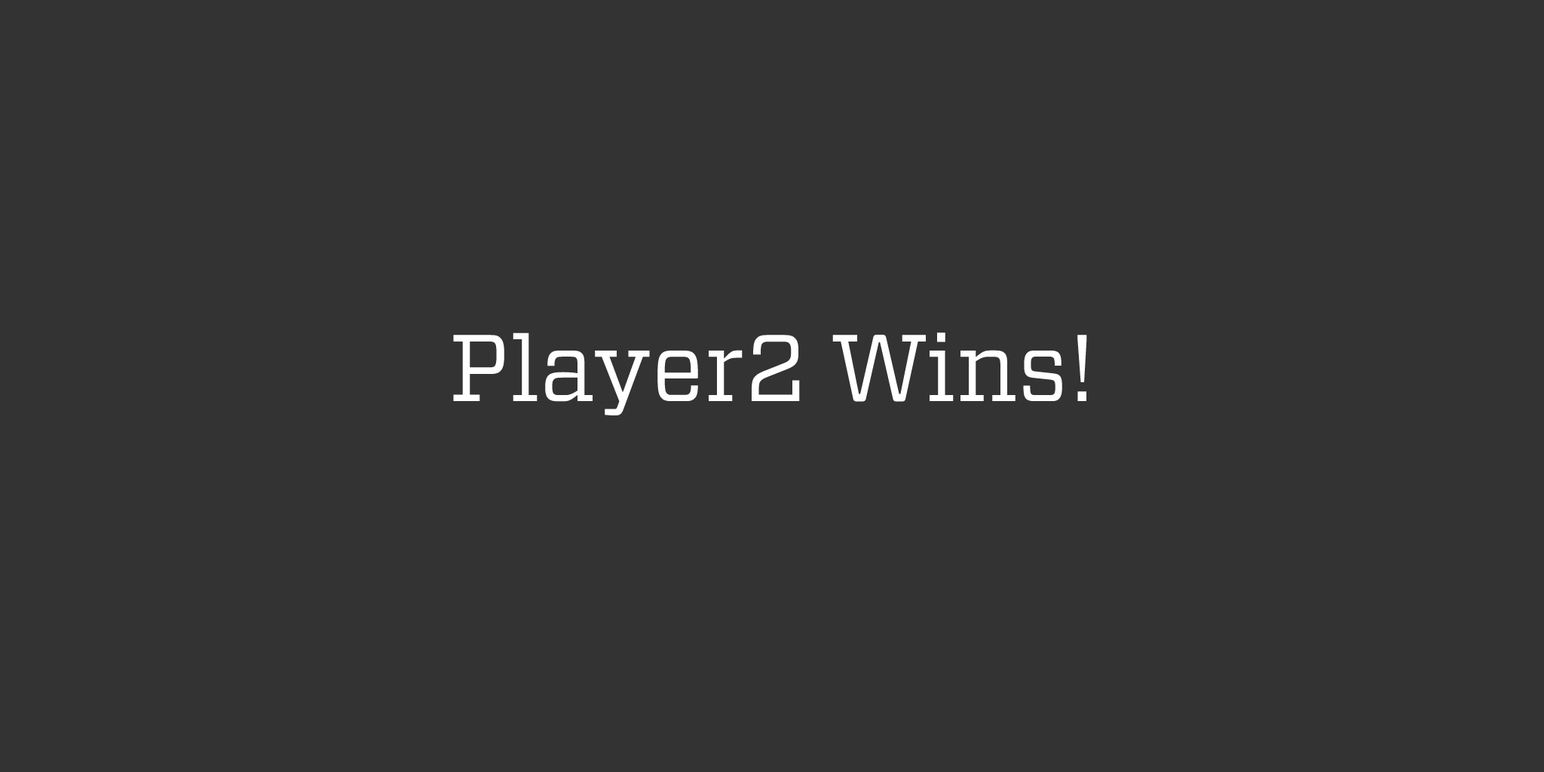
<style>
.page{position:relative;width:1544px;height:772px;background:#333333}
.page>*{position:absolute;margin:0}
.t1{font:94.3px "Vitesse-Book";color:#ffffff}
</style>
<div class="page">
<p class="t1" style="left:453px;top:333px;width:634px;height:82px">Player2 Wins!</p>
</div>
